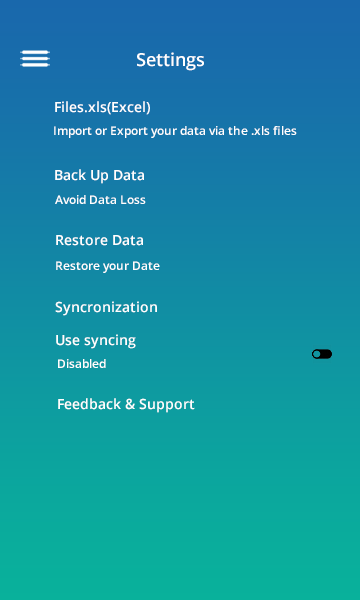
<style>
.page{position:relative;width:360px;height:600px}
.page>*{position:absolute;margin:0}
.t1{font:18px "OpenSans-Semibold";color:#ffffff}
.t2{font:14px "OpenSans-Semibold";color:#ffffff}
.t3{font:12px "OpenSans-Semibold";color:#ffffff}
</style>
<div class="page">
<p class="t1" style="left:137px;top:52px;width:67px;height:19px">Settings</p>
<p class="t2" style="left:55px;top:101px;width:95px;height:14px">Files.xls(Excel)</p>
<p class="t3" style="left:54px;top:126px;width:243px;height:12px">Import or Export your data via the .xls files</p>
<p class="t2" style="left:55px;top:169px;width:89px;height:15px">Back Up Data</p>
<p class="t3" style="left:55px;top:195px;width:91px;height:9px">Avoid Data Loss</p>
<p class="t2" style="left:56px;top:235px;width:87px;height:11px">Restore Data</p>
<p class="t3" style="left:56px;top:261px;width:104px;height:12px">Restore your Date</p>
<p class="t2" style="left:55px;top:301px;width:102px;height:15px">Syncronization</p>
<p class="t2" style="left:56px;top:334px;width:80px;height:15px">Use syncing</p>
<p class="t3" style="left:58px;top:359px;width:48px;height:9px">Disabled</p>
<p class="t2" style="left:58px;top:398px;width:137px;height:15px">Feedback &amp; Support</p>
</div>
